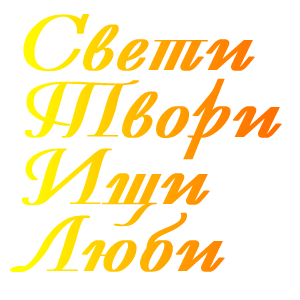
<style>
.page{position:relative;width:300px;height:300px;background:#ffffff}
.page>*{position:absolute;margin:0}
.t1{font:79.2px/67px "Decor-Bold";letter-spacing:0.01em;scale:1.36 1}
</style>
<div class="page">
<p class="t1" style="left:10px;top:14px;width:272px;height:259px">Свети<br>Твори<br>Ищи<br>Люби</p>
</div>
